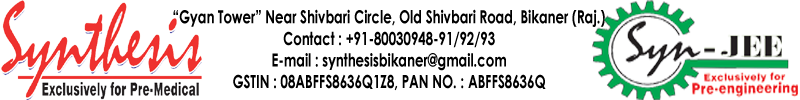
<style>
.page{position:relative;width:800px;height:100px;background:#ffffff}
.page>*{position:absolute;margin:0}
.t1{font:18px "CenturyGothic-Bold";color:#000000;scale:0.73 1}
</style>
<div class="page">
<p class="t1" style="left:173px;top:9px;width:432px;height:82px;text-align:center">“Gyan Tower” Near Shivbari Circle, Old Shivbari Road, Bikaner (Raj.)<br>Contact : +91-80030948-91/92/93<br>E-mail : synthesisbikaner@gmail.com<br>GSTIN : 08ABFFS8636Q1Z8, PAN NO. : ABFFS8636Q</p>
</div>
